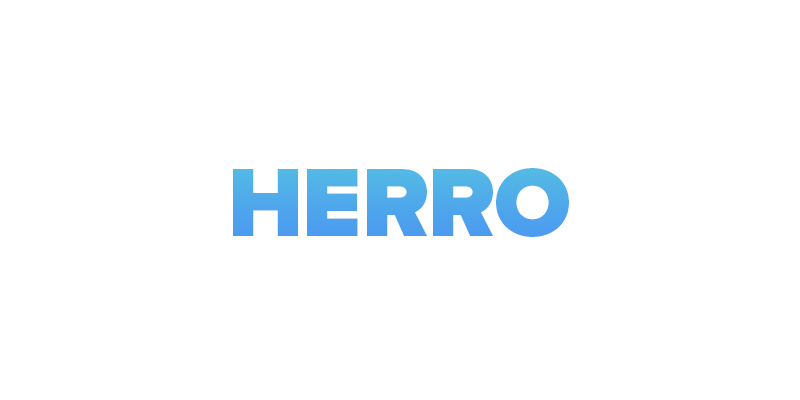
<style>
.page{position:relative;width:800px;height:400px;background:#ffffff}
.page>*{position:absolute;margin:0}
.t1{font:100px "ProximaNova-Black";color:#4b99f0}
</style>
<div class="page">
<p class="t1" style="left:233px;top:168px;width:336px;height:69px">HERRO</p>
</div>
